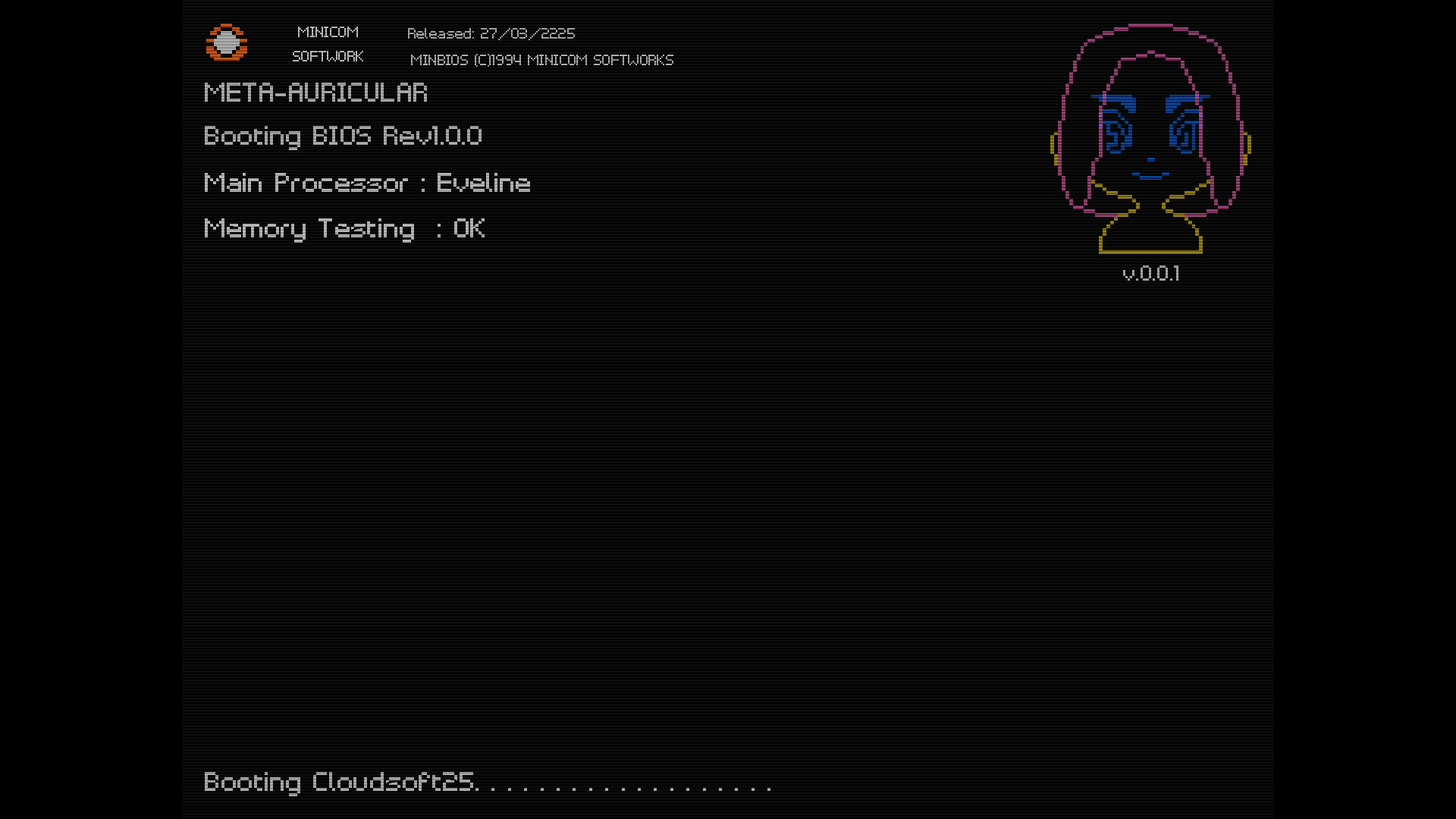
<style>
.page{position:relative;width:1456px;height:819px;background:#000000}
.page>*{position:absolute;margin:0}
.t1{font:20.1px "PixelarRegularW01-Regular";color:#b4b4b4}
.t2{font:20.1px "PixelarRegularW01-Regular";color:#9f9f9f}
.t3{font:20.1px "PixelarRegularW01-Regular"}
.t4{font:37.9px "PixelarRegularW01-Regular"}
.t5{font:29.7px "PixelarRegularW01-Regular"}
</style>
<div class="page">
<p class="t1" style="left:293px;top:27px;width:70px;height:34px;text-align:center">MINICOM<br>SOFTWORK</p>
<p class="t2" style="left:408px;top:28px;width:167px;height:12px">Released: 27/03/2225</p>
<p class="t3" style="left:411px;top:54px;width:262px;height:13px">MINBIOS (C)1994 MINICOM SOFTWORKS</p>
<p class="t4" style="left:205px;top:83px;width:222px;height:19px">META-AURICULAR</p>
<p class="t4" style="left:205px;top:126px;width:277px;height:24px">Booting BIOS Rev1.0.0</p>
<p class="t4" style="left:205px;top:173px;width:325px;height:70px">Main Processor : Eveline<br>Memory Testing  : OK</p>
<p class="t5" style="left:1123px;top:265px;width:55px;height:16px">v.0.0.1</p>
<p class="t4" style="left:205px;top:772px;width:565px;height:24px">Booting Cloudsoft25. . . . . . . . . . . . . . . . . . .</p>
</div>
